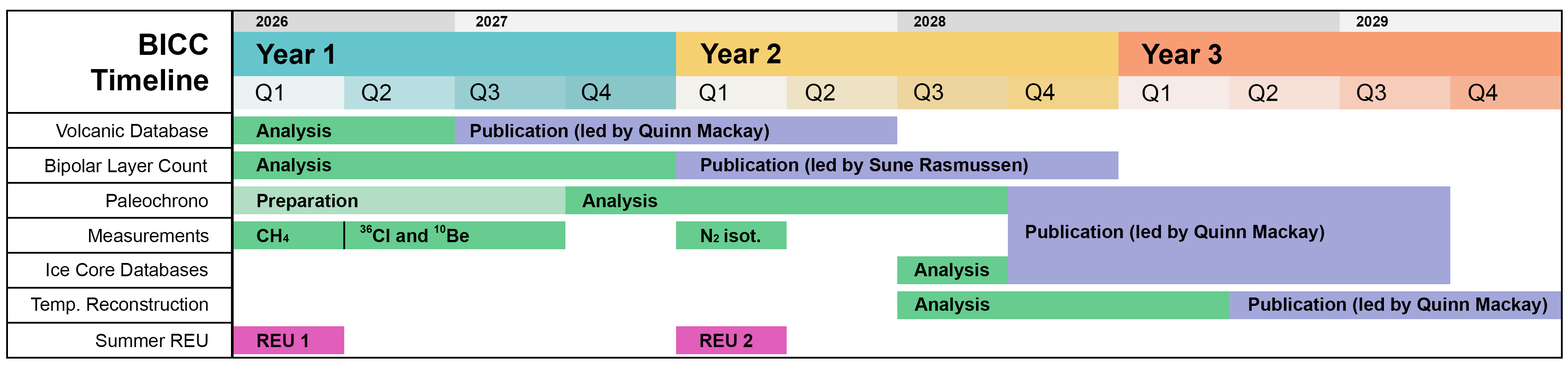
<style>
.page{position:relative;width:1568px;height:367px;background:#ffffff}
.page>*{position:absolute;margin:0}
.t1{font:14.7px "Arial-BoldMT";color:#000000}
.t2{font:29.5px "Arial-BoldMT";color:#010101}
.t3{font:27.7px "Arial-BoldMT";color:#000000}
.t4{font:23px "ArialMT";color:#000000}
.t5{font:18.4px "ArialMT";color:#010101}
.t6{font:18.4px "Arial-BoldMT";color:#000000}
.t7{font:11.1px "Arial-BoldMT";color:#000000}
</style>
<div class="page">
<p class="t1" style="left:256px;top:16px;width:32px;height:11px">2026</p>
<p class="t1" style="left:476px;top:16px;width:31px;height:11px">2027</p>
<p class="t1" style="left:914px;top:16px;width:31px;height:11px">2028</p>
<p class="t1" style="left:1357px;top:16px;width:31px;height:11px">2029</p>
<p class="t2" style="left:91px;top:33px;width:117px;height:58px;text-align:right">BICC<br>Timeline</p>
<p class="t3" style="left:256px;top:44px;width:77px;height:20px">Year 1</p>
<p class="t3" style="left:700px;top:43px;width:80px;height:21px">Year 2</p>
<p class="t3" style="left:1141px;top:44px;width:81px;height:20px">Year 3</p>
<p class="t4" style="left:256px;top:84px;width:26px;height:18px">Q1</p>
<p class="t4" style="left:362px;top:84px;width:29px;height:18px">Q2</p>
<p class="t4" style="left:470px;top:83px;width:30px;height:18px">Q3</p>
<p class="t4" style="left:582px;top:83px;width:29px;height:18px">Q4</p>
<p class="t4" style="left:699px;top:84px;width:27px;height:18px">Q1</p>
<p class="t4" style="left:806px;top:84px;width:29px;height:18px">Q2</p>
<p class="t4" style="left:914px;top:83px;width:29px;height:18px">Q3</p>
<p class="t4" style="left:1026px;top:83px;width:29px;height:18px">Q4</p>
<p class="t4" style="left:1142px;top:84px;width:26px;height:18px">Q1</p>
<p class="t4" style="left:1249px;top:84px;width:29px;height:18px">Q2</p>
<p class="t4" style="left:1357px;top:84px;width:29px;height:18px">Q3</p>
<p class="t4" style="left:1468px;top:84px;width:30px;height:18px">Q4</p>
<p class="t5" style="left:56px;top:124px;width:152px;height:13px">Volcanic Database</p>
<p class="t6" style="left:256px;top:124px;width:75px;height:17px">Analysis</p>
<p class="t6" style="left:471px;top:124px;width:298px;height:17px">Publication (led by Quinn Mackay)</p>
<p class="t5" style="left:46px;top:159px;width:162px;height:17px">Bipolar Layer Count</p>
<p class="t6" style="left:256px;top:158px;width:75px;height:17px">Analysis</p>
<p class="t6" style="left:701px;top:158px;width:327px;height:17px">Publication (led by Sune Rasmussen)</p>
<p class="t5" style="left:107px;top:194px;width:101px;height:13px">Paleochrono</p>
<p class="t6" style="left:257px;top:194px;width:100px;height:17px">Preparation</p>
<p class="t6" style="left:582px;top:194px;width:75px;height:17px">Analysis</p>
<p class="t5" style="left:89px;top:229px;width:120px;height:13px">Measurements</p>
<p class="t6" style="left:257px;top:229px;width:32px;height:13px">CH<span class="t7">4</span></p>
<p class="t6" style="left:360px;top:225px;width:109px;height:17px"><span class="t7">36</span>Cl and <span class="t7">10</span>Be</p>
<p class="t6" style="left:701px;top:229px;width:59px;height:13px">N<span class="t7">2 </span>isot.</p>
<p class="t6" style="left:1026px;top:225px;width:298px;height:17px">Publication (led by Quinn Mackay)</p>
<p class="t5" style="left:46px;top:263px;width:162px;height:13px">Ice Core Databases</p>
<p class="t6" style="left:914px;top:263px;width:75px;height:17px">Analysis</p>
<p class="t5" style="left:31px;top:297px;width:177px;height:17px">Temp. Reconstruction</p>
<p class="t6" style="left:915px;top:297px;width:75px;height:17px">Analysis</p>
<p class="t6" style="left:1249px;top:297px;width:298px;height:17px">Publication (led by Quinn Mackay)</p>
<p class="t5" style="left:96px;top:334px;width:112px;height:13px">Summer REU</p>
<p class="t6" style="left:257px;top:334px;width:50px;height:13px">REU 1</p>
<p class="t6" style="left:700px;top:334px;width:53px;height:13px">REU 2</p>
</div>
